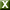
<style>
.page{position:relative;width:10px;height:10px}
.page>*{position:absolute;margin:0}
.t1{font:10px "Arial-BoldMT";color:#ffffff}
</style>
<div class="page">
<p class="t1" style="left:1px;top:1px;width:8px;height:7px">X</p>
</div>
